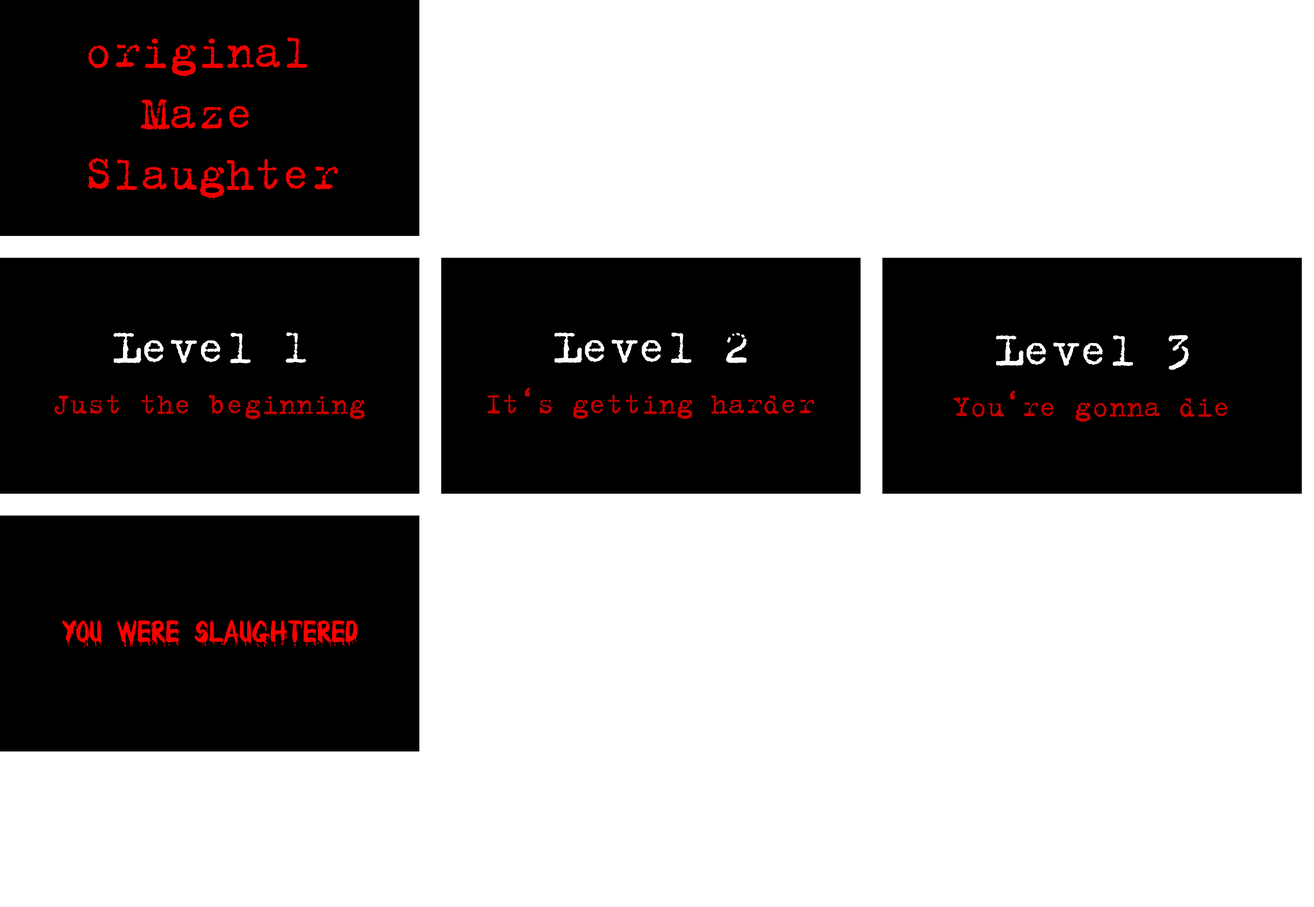
<style>
.page{position:relative;width:1314px;height:907px;background:#ffffff}
.page>*{position:absolute;margin:0}
.t1{font:50.9px "Trixie-Light";letter-spacing:-0.02em;color:#ef0000;font-weight:bold}
.t2{font:50.9px "Trixie-Light";letter-spacing:-0.02em;color:#ffffff;font-weight:bold}
.t3{font:31.2px "Trixie-Light";letter-spacing:-0.02em;color:#c60000;font-weight:bold}
</style>
<div class="page">
<p class="t1" style="left:88px;top:37px;width:250px;height:162px;text-align:center">original <br>Maze <br>Slaughter</p>
<p class="t2" style="left:114px;top:332px;width:193px;height:32px">Level 1</p>
<p class="t2" style="left:555px;top:333px;width:192px;height:31px">Level 2</p>
<p class="t2" style="left:996px;top:335px;width:193px;height:35px">Level 3</p>
<p class="t3" style="left:487px;top:388px;width:328px;height:31px">It‘s getting harder</p>
<p class="t3" style="left:55px;top:395px;width:310px;height:25px">Just the beginning</p>
<p class="t3" style="left:954px;top:390px;width:274px;height:32px">You‘re gonna die</p>
</div>
